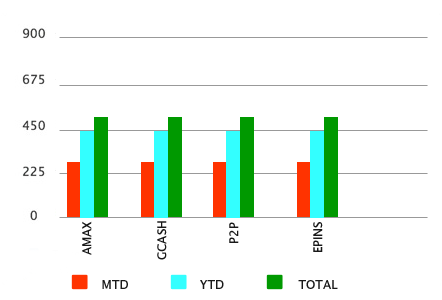
<style>
.page{position:relative;width:442px;height:300px;background:#ffffff}
.page>*{position:absolute;margin:0}
.t1{font:12px "LucidaGrande";color:#191919;text-transform:uppercase}
</style>
<div class="page">
<p class="t1" style="left:82px;top:221px;width:10px;height:34px;rotate:180deg">amax</p>
<p class="t1" style="left:157px;top:221px;width:10px;height:39px;rotate:180deg">gcash</p>
<p class="t1" style="left:229px;top:222px;width:10px;height:21px;rotate:180deg">p2p</p>
<p class="t1" style="left:313px;top:222px;width:10px;height:30px;rotate:180deg">epins</p>
<p class="t1" style="left:102px;top:280px;width:26px;height:9px">MTD</p>
<p class="t1" style="left:200px;top:280px;width:24px;height:9px">YTD</p>
<p class="t1" style="left:298px;top:280px;width:40px;height:9px">TOTAL</p>
</div>
